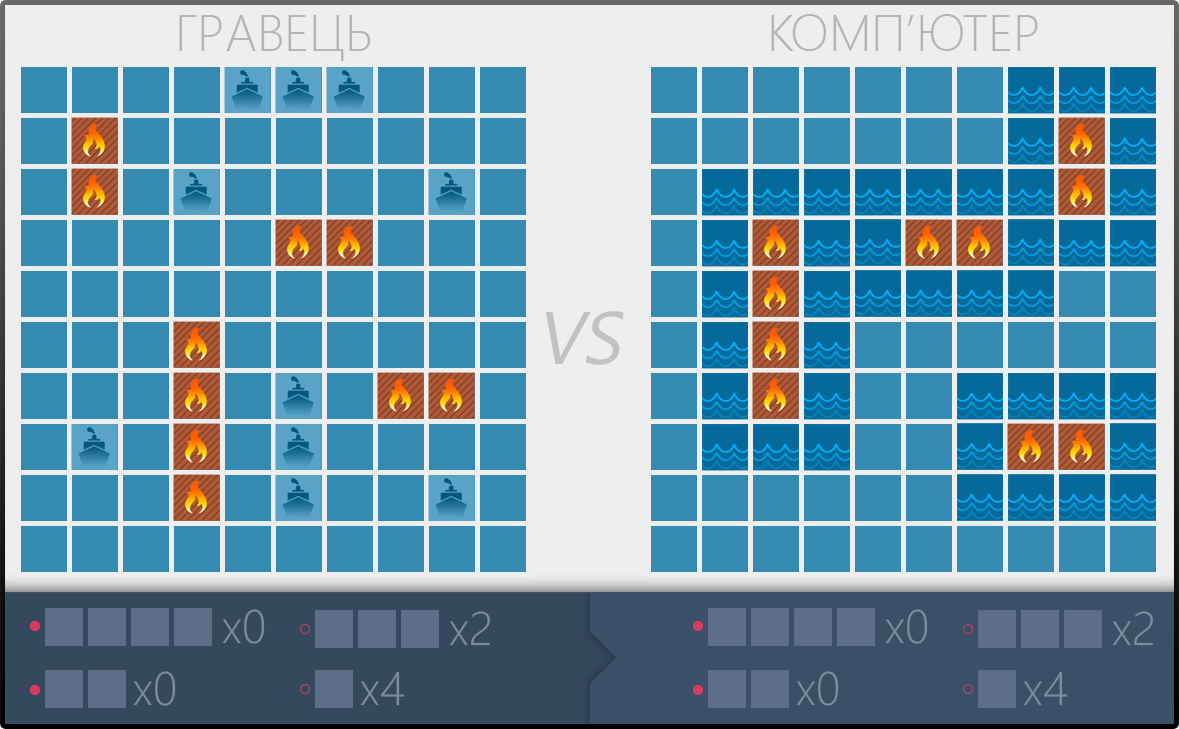
<style>
.page{position:relative;width:1179px;height:729px;background:#358ab1}
.page>*{position:absolute;margin:0}
.t1{font:50.6px "SegoeUI-Light";color:#c2c2c2;text-transform:uppercase}
.t2{font:74.4px "SegoeUI";color:#c2c2c2;text-transform:uppercase;font-style:italic}
.t3{font:47px "SegoeUI-Light";color:#7a8d9b}
.t4{font:47px "SegoeUI-Light";color:#7a8d9b;text-transform:uppercase}
</style>
<div class="page">
<p class="t1" style="left:179px;top:15px;width:192px;height:46px">гравець</p>
<p class="t1" style="left:771px;top:14px;width:267px;height:37px">Комп’ютер</p>
<p class="t2" style="left:545px;top:311px;width:79px;height:54px">VS</p>
<p class="t3" style="left:222px;top:609px;width:43px;height:35px">x<span class="t4">0</span></p>
<p class="t3" style="left:449px;top:611px;width:41px;height:35px">x<span class="t4">2</span></p>
<p class="t3" style="left:885px;top:609px;width:43px;height:35px">x<span class="t4">0</span></p>
<p class="t3" style="left:1112px;top:611px;width:41px;height:35px">x<span class="t4">2</span></p>
<p class="t3" style="left:133px;top:671px;width:43px;height:35px">x<span class="t4">0</span></p>
<p class="t3" style="left:360px;top:671px;width:45px;height:35px">x<span class="t4">4</span></p>
<p class="t3" style="left:796px;top:671px;width:43px;height:35px">x<span class="t4">0</span></p>
<p class="t3" style="left:1023px;top:671px;width:45px;height:35px">x<span class="t4">4</span></p>
</div>
